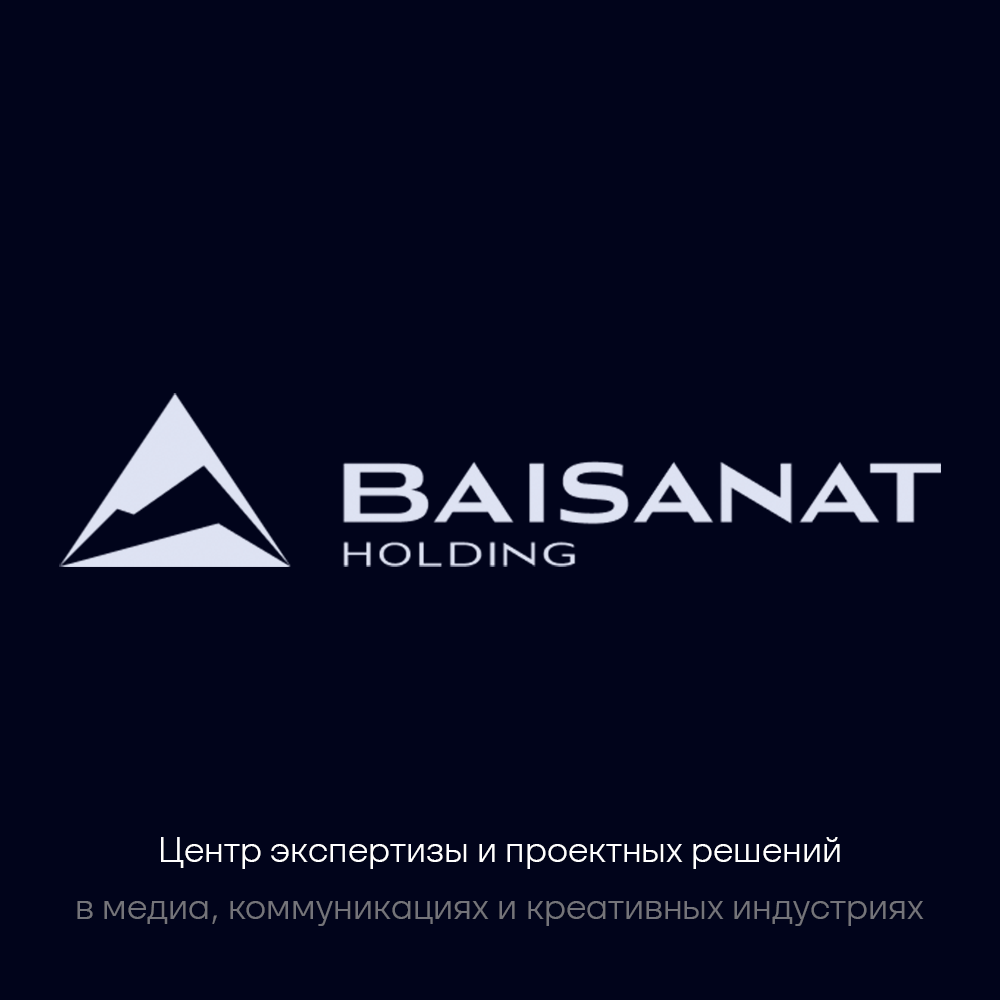
<style>
.page{position:relative;width:1000px;height:1000px;background:#01041b}
.page>*{position:absolute;margin:0}
.t1{font:34.8px "SFTSchriftedSansTRIAL-Light";color:#ffffff}
.t2{font:34.8px "SFTSchriftedSansTRIAL-Light";color:#74747a}
</style>
<div class="page">
<p class="t1" style="left:161px;top:837px;width:679px;height:32px">Центр экспертизы и проектных решений</p>
<p class="t2" style="left:77px;top:901px;width:847px;height:25px">в медиа, коммуникациях и креативных индустриях</p>
</div>
